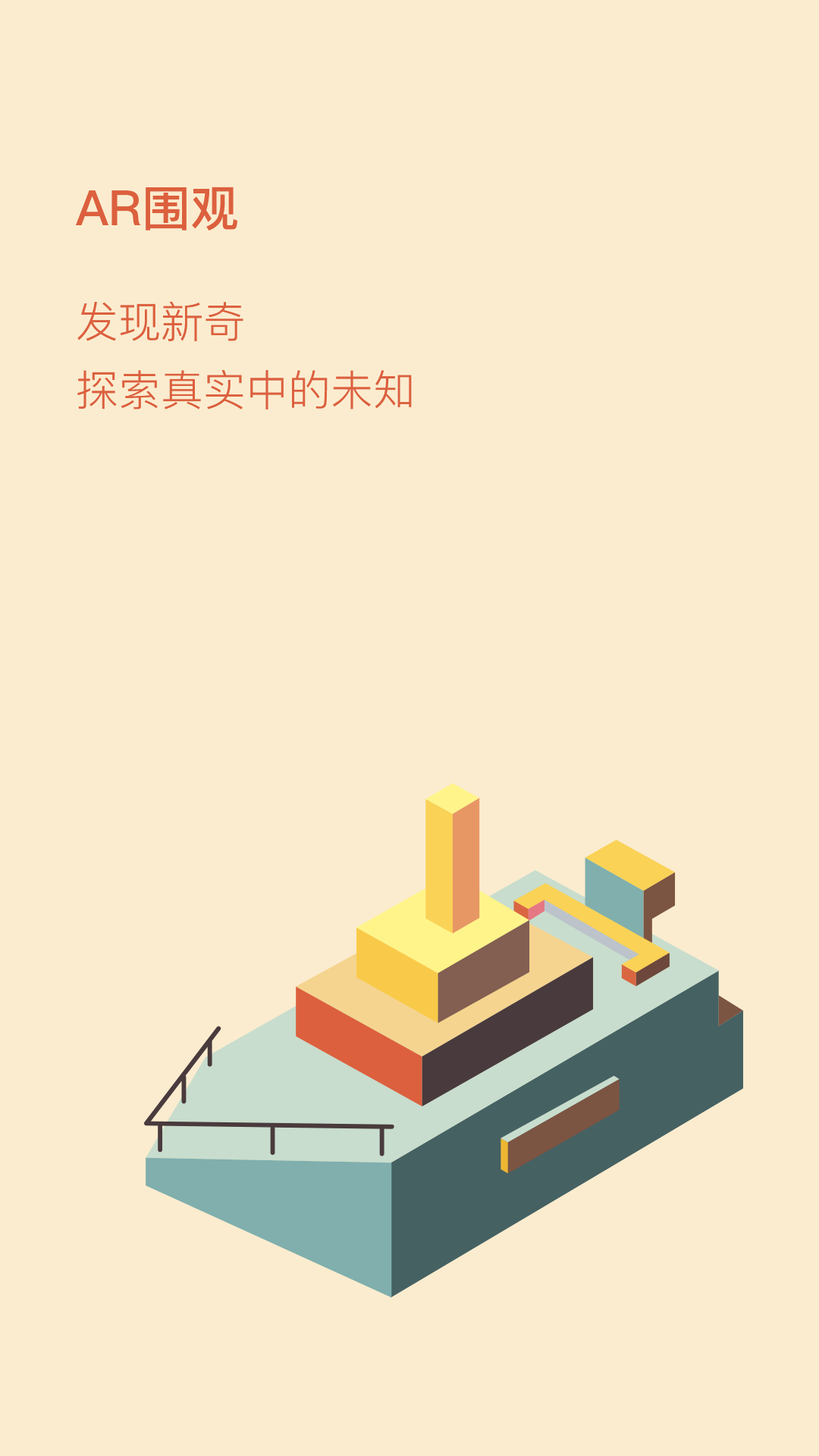
<style>
.page{position:relative;width:819px;height:1456px;background:#fbeccf}
.page>*{position:absolute;margin:0}
.t1{font:48.5px "PingFang-SC-Bold";color:#dc603e}
.t2{font:42.5px/68.2px "PingFang-SC-Regular";color:#dc603e}
</style>
<div class="page">
<p class="t1" style="left:76px;top:187px;width:161px;height:44px">AR围观</p>
<p class="t2" style="left:77px;top:301px;width:335px;height:108px">发现新奇<br>探索真实中的未知</p>
</div>
